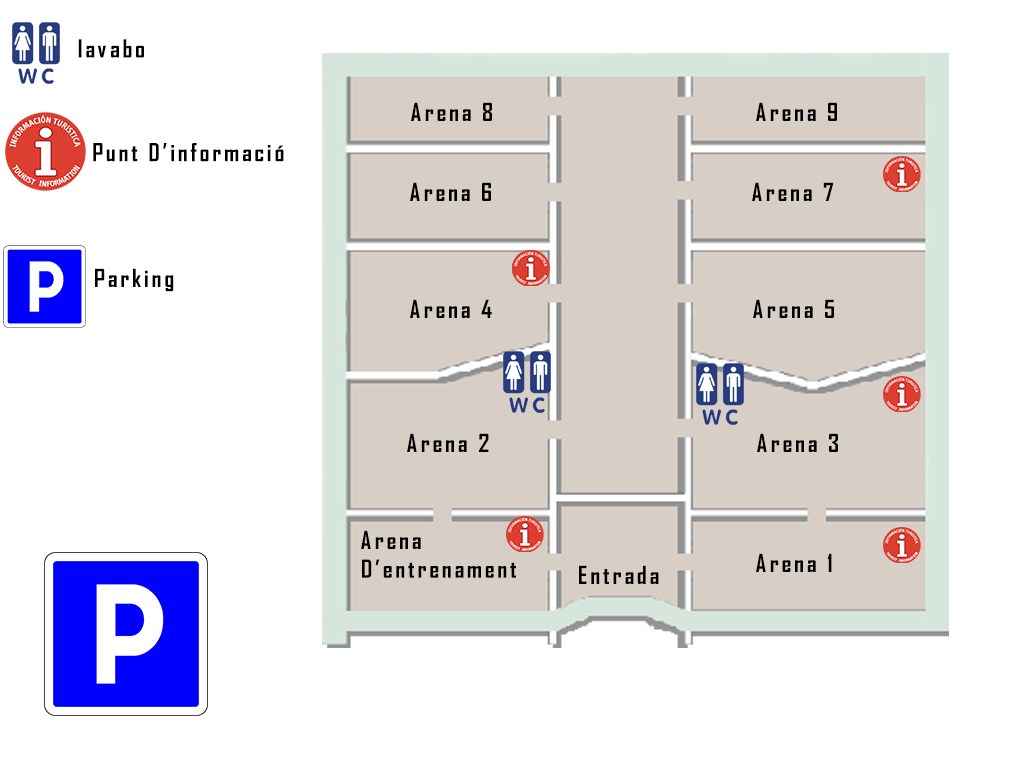
<style>
.page{position:relative;width:1024px;height:768px;background:#ffffff}
.page>*{position:absolute;margin:0}
.t1{font:24px "AgencyFB-Bold";letter-spacing:0.12em;color:#000000}
</style>
<div class="page">
<p class="t1" style="left:78px;top:39px;width:66px;height:19px">lavabo</p>
<p class="t1" style="left:411px;top:102px;width:81px;height:19px">Arena 8</p>
<p class="t1" style="left:756px;top:102px;width:81px;height:19px">Arena 9</p>
<p class="t1" style="left:93px;top:143px;width:191px;height:19px">Punt D’informació</p>
<p class="t1" style="left:410px;top:182px;width:81px;height:19px">Arena 6</p>
<p class="t1" style="left:752px;top:182px;width:81px;height:19px">Arena 7</p>
<p class="t1" style="left:95px;top:268px;width:79px;height:24px">Parking</p>
<p class="t1" style="left:410px;top:299px;width:82px;height:19px">Arena 4</p>
<p class="t1" style="left:753px;top:299px;width:81px;height:19px">Arena 5</p>
<p class="t1" style="left:407px;top:433px;width:82px;height:19px">Arena 2</p>
<p class="t1" style="left:757px;top:433px;width:81px;height:19px">Arena 3</p>
<p class="t1" style="left:361px;top:530px;width:155px;height:48px">Arena <br>D’entrenament</p>
<p class="t1" style="left:756px;top:553px;width:76px;height:19px">Arena 1</p>
<p class="t1" style="left:579px;top:565px;width:80px;height:19px">Entrada</p>
</div>
